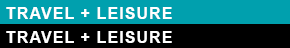
<style>
.page{position:relative;width:290px;height:48px;background:#00a0ae}
.page>*{position:absolute;margin:0}
.t1{font:16px "Arial-BoldMT";letter-spacing:0.068em;color:#ffffff}
</style>
<div class="page">
<p class="t1" style="left:6px;top:7px;width:166px;height:12px">TRAVEL + LEISURE</p>
<p class="t1" style="left:6px;top:31px;width:166px;height:12px">TRAVEL + LEISURE</p>
</div>
